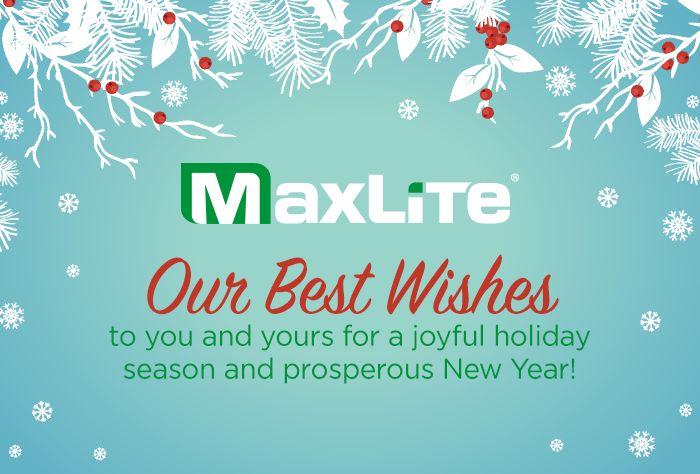
<style>
.page{position:relative;width:700px;height:474px}
.page>*{position:absolute;margin:0}
.t1{font:29.1px/33px "Gotham-Book";letter-spacing:-0.01em;color:#00943a;scale:0.95 1}
.t2{font:88.1px/37px "SignPainter-HouseScript";letter-spacing:-0.01em;color:#c03627;scale:0.95 1}
</style>
<div class="page">
<p class="t1" style="left:109px;top:254px;width:482px;height:130px;text-align:center"><span class="t2">Our Best Wishes<br></span>to you and yours for a joyful holiday season and prosperous New Year!</p>
</div>
